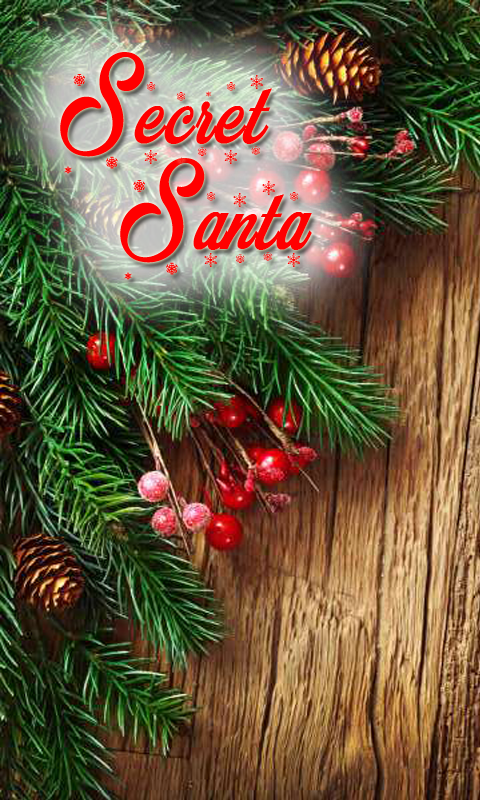
<style>
.page{position:relative;width:480px;height:800px}
.page>*{position:absolute;margin:0}
.t1{font:99.6px "MerryChristmasFlake";letter-spacing:0.025em;color:#ff0000}
.t2{font:132.8px "MerryChristmasFlake";letter-spacing:0.025em;color:#ff0000}
</style>
<div class="page">
<p class="t1" style="left:60px;top:52px;width:212px;height:122px"><span class="t2">S</span>ecret</p>
<p class="t1" style="left:120px;top:158px;width:192px;height:122px"><span class="t2">S</span>anta</p>
</div>
